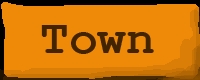
<style>
.page{position:relative;width:200px;height:80px;background:#ef8a08}
.page>*{position:absolute;margin:0}
.t1{font:48px "CourierNewPS-BoldMT";color:#422500}
</style>
<div class="page">
<p class="t1" style="left:41px;top:25px;width:113px;height:29px">Town</p>
</div>
